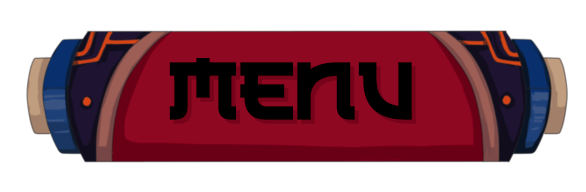
<style>
.page{position:relative;width:586px;height:192px;background:#ffffff}
.page>*{position:absolute;margin:0}
.t1{font:90px "Japanese3017";color:#000000}
</style>
<div class="page">
<p class="t1" style="left:169px;top:58px;width:243px;height:62px">menu</p>
</div>
